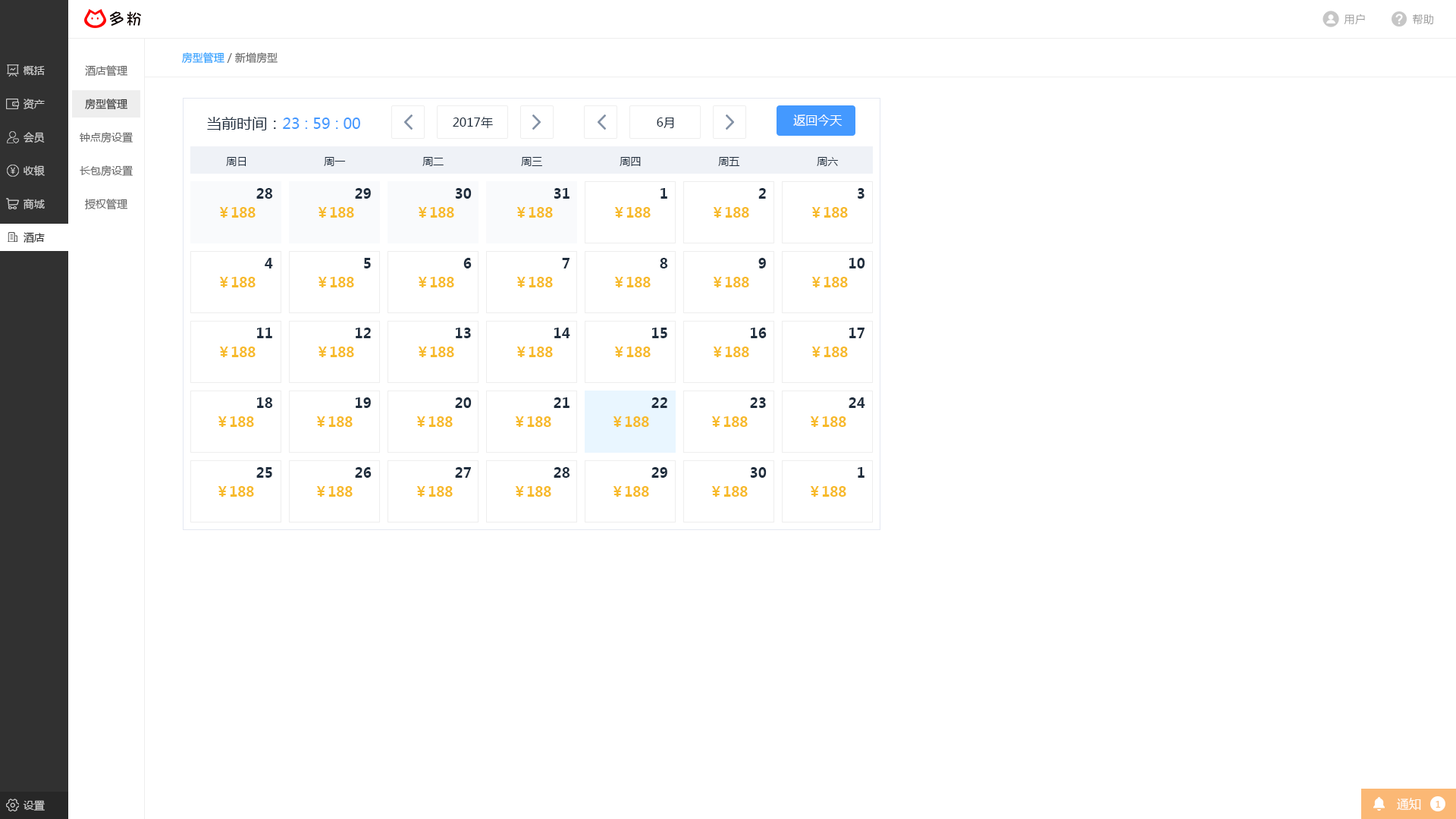
<style>
.page{position:relative;width:1456px;height:819px;background:#ffffff}
.page>*{position:absolute;margin:0}
.t1{font:10.6px "MicrosoftYaHei";letter-spacing:0.025em;color:#999999}
.t2{font:10.6px "MicrosoftYaHei";color:#666666}
.t3{font:10.6px "MicrosoftYaHei";color:#20a0ff}
.t4{font:10.6px "MicrosoftYaHei";color:#cccccc}
.t5{font:10.6px "MicrosoftYaHei";color:#333333}
.t6{font:15.2px "MicrosoftYaHei";color:#4499ff}
.t7{font:15.2px "MicrosoftYaHei";color:#1f2d3d}
.t8{font:12.1px "MicrosoftYaHei";color:#1f2d3d}
.t9{font:12.1px "MicrosoftYaHei";color:#ffffff}
.t10{font:10.6px "MicrosoftYaHei";color:#1f2d3d}
.t11{font:13.6px "MicrosoftYaHei-Bold";color:#1f2d3d}
.t12{font:13.6px "MicrosoftYaHei-Bold";color:#f7ba2a}
.t13{font:10.6px "MicrosoftYaHei";color:#313131}
.t14{font:9.1px "MicrosoftYaHei";color:#fbb875}
</style>
<div class="page">
<p class="t1" style="left:1344px;top:14px;width:21px;height:11px">用户</p>
<p class="t1" style="left:1413px;top:14px;width:20px;height:11px">帮助</p>
<p class="t2" style="left:182px;top:52px;width:96px;height:12px"><span class="t3">房型管理</span> / 新增房型</p>
<p class="t4" style="left:23px;top:66px;width:22px;height:9px">概括</p>
<p class="t2" style="left:85px;top:65px;width:42px;height:12px">酒店管理</p>
<p class="t4" style="left:24px;top:99px;width:21px;height:10px">资产</p>
<p class="t5" style="left:85px;top:99px;width:42px;height:11px">房型管理</p>
<p class="t6" style="left:207px;top:117px;width:153px;height:13px"><span class="t7">当前时间：</span>23 : 59 : 00</p>
<p class="t8" style="left:453px;top:117px;width:40px;height:11px">2017年</p>
<p class="t8" style="left:657px;top:118px;width:17px;height:10px">6月</p>
<p class="t9" style="left:793px;top:115px;width:49px;height:11px">返回今天</p>
<p class="t4" style="left:24px;top:132px;width:21px;height:11px">会员</p>
<p class="t2" style="left:80px;top:132px;width:53px;height:11px">钟点房设置</p>
<p class="t10" style="left:226px;top:157px;width:20px;height:9px">周日</p>
<p class="t10" style="left:324px;top:157px;width:22px;height:9px">周一</p>
<p class="t10" style="left:422px;top:157px;width:22px;height:9px">周二</p>
<p class="t10" style="left:521px;top:157px;width:21px;height:9px">周三</p>
<p class="t10" style="left:620px;top:157px;width:21px;height:9px">周四</p>
<p class="t10" style="left:718px;top:157px;width:22px;height:9px">周五</p>
<p class="t10" style="left:817px;top:157px;width:21px;height:9px">周六</p>
<p class="t4" style="left:24px;top:165px;width:21px;height:11px">收银</p>
<p class="t2" style="left:80px;top:165px;width:53px;height:12px">长包房设置</p>
<p class="t11" style="left:256px;top:188px;width:17px;height:11px">28</p>
<p class="t11" style="left:355px;top:188px;width:16px;height:11px">29</p>
<p class="t11" style="left:455px;top:188px;width:17px;height:11px">30</p>
<p class="t11" style="left:554px;top:188px;width:16px;height:11px">31</p>
<p class="t11" style="left:660px;top:188px;width:7px;height:11px">1</p>
<p class="t11" style="left:758px;top:188px;width:8px;height:11px">2</p>
<p class="t11" style="left:858px;top:188px;width:6px;height:11px">3</p>
<p class="t4" style="left:23px;top:199px;width:22px;height:10px">商城</p>
<p class="t2" style="left:85px;top:199px;width:42px;height:11px">授权管理</p>
<p class="t12" style="left:219px;top:207px;width:37px;height:11px">￥188</p>
<p class="t12" style="left:318px;top:207px;width:36px;height:11px">￥188</p>
<p class="t12" style="left:418px;top:207px;width:36px;height:11px">￥188</p>
<p class="t12" style="left:516px;top:207px;width:37px;height:11px">￥188</p>
<p class="t12" style="left:614px;top:207px;width:37px;height:11px">￥188</p>
<p class="t12" style="left:713px;top:207px;width:36px;height:11px">￥188</p>
<p class="t12" style="left:811px;top:207px;width:37px;height:11px">￥188</p>
<p class="t13" style="left:24px;top:232px;width:21px;height:11px">酒店</p>
<p class="t11" style="left:265px;top:258px;width:8px;height:10px">4</p>
<p class="t11" style="left:364px;top:258px;width:7px;height:10px">5</p>
<p class="t11" style="left:463px;top:258px;width:9px;height:10px">6</p>
<p class="t11" style="left:562px;top:258px;width:8px;height:10px">7</p>
<p class="t11" style="left:660px;top:258px;width:8px;height:10px">8</p>
<p class="t11" style="left:758px;top:258px;width:8px;height:10px">9</p>
<p class="t11" style="left:849px;top:258px;width:16px;height:10px">10</p>
<p class="t12" style="left:219px;top:277px;width:37px;height:10px">￥188</p>
<p class="t12" style="left:318px;top:277px;width:36px;height:10px">￥188</p>
<p class="t12" style="left:418px;top:277px;width:36px;height:10px">￥188</p>
<p class="t12" style="left:516px;top:277px;width:37px;height:10px">￥188</p>
<p class="t12" style="left:614px;top:277px;width:37px;height:10px">￥188</p>
<p class="t12" style="left:713px;top:277px;width:36px;height:10px">￥188</p>
<p class="t12" style="left:811px;top:277px;width:37px;height:10px">￥188</p>
<p class="t11" style="left:257px;top:328px;width:15px;height:10px">11</p>
<p class="t11" style="left:356px;top:328px;width:15px;height:10px">12</p>
<p class="t11" style="left:456px;top:328px;width:15px;height:10px">13</p>
<p class="t11" style="left:554px;top:328px;width:16px;height:10px">14</p>
<p class="t11" style="left:652px;top:328px;width:15px;height:10px">15</p>
<p class="t11" style="left:751px;top:328px;width:16px;height:10px">16</p>
<p class="t11" style="left:849px;top:328px;width:15px;height:10px">17</p>
<p class="t12" style="left:219px;top:347px;width:37px;height:10px">￥188</p>
<p class="t12" style="left:318px;top:347px;width:36px;height:10px">￥188</p>
<p class="t12" style="left:418px;top:347px;width:36px;height:10px">￥188</p>
<p class="t12" style="left:516px;top:347px;width:37px;height:10px">￥188</p>
<p class="t12" style="left:614px;top:347px;width:37px;height:10px">￥188</p>
<p class="t12" style="left:713px;top:347px;width:36px;height:10px">￥188</p>
<p class="t12" style="left:811px;top:347px;width:37px;height:10px">￥188</p>
<p class="t11" style="left:257px;top:397px;width:16px;height:11px">18</p>
<p class="t11" style="left:356px;top:397px;width:15px;height:11px">19</p>
<p class="t11" style="left:455px;top:397px;width:17px;height:11px">20</p>
<p class="t11" style="left:554px;top:397px;width:16px;height:11px">21</p>
<p class="t11" style="left:651px;top:397px;width:16px;height:11px">22</p>
<p class="t11" style="left:750px;top:397px;width:16px;height:11px">23</p>
<p class="t11" style="left:849px;top:397px;width:16px;height:11px">24</p>
<p class="t12" style="left:218px;top:416px;width:36px;height:11px">￥188</p>
<p class="t12" style="left:316px;top:416px;width:37px;height:11px">￥188</p>
<p class="t12" style="left:416px;top:416px;width:37px;height:11px">￥188</p>
<p class="t12" style="left:515px;top:416px;width:36px;height:11px">￥188</p>
<p class="t12" style="left:613px;top:416px;width:36px;height:11px">￥188</p>
<p class="t12" style="left:711px;top:416px;width:37px;height:11px">￥188</p>
<p class="t12" style="left:810px;top:416px;width:36px;height:11px">￥188</p>
<p class="t11" style="left:256px;top:467px;width:16px;height:11px">25</p>
<p class="t11" style="left:355px;top:467px;width:17px;height:11px">26</p>
<p class="t11" style="left:455px;top:467px;width:16px;height:11px">27</p>
<p class="t11" style="left:554px;top:467px;width:16px;height:11px">28</p>
<p class="t11" style="left:651px;top:467px;width:16px;height:11px">29</p>
<p class="t11" style="left:750px;top:467px;width:17px;height:11px">30</p>
<p class="t11" style="left:858px;top:467px;width:6px;height:11px">1</p>
<p class="t12" style="left:218px;top:486px;width:36px;height:11px">￥188</p>
<p class="t12" style="left:316px;top:486px;width:37px;height:11px">￥188</p>
<p class="t12" style="left:416px;top:486px;width:37px;height:11px">￥188</p>
<p class="t12" style="left:515px;top:486px;width:36px;height:11px">￥188</p>
<p class="t12" style="left:613px;top:486px;width:36px;height:11px">￥188</p>
<p class="t12" style="left:711px;top:486px;width:37px;height:11px">￥188</p>
<p class="t12" style="left:810px;top:486px;width:36px;height:11px">￥188</p>
<p class="t9" style="left:1397px;top:798px;width:24px;height:12px">通知</p>
<p class="t4" style="left:23px;top:800px;width:22px;height:11px">设置</p>
<p class="t14" style="left:1436px;top:801px;width:5px;height:7px">1</p>
</div>
